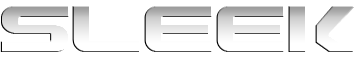
<style>
.page{position:relative;width:358px;height:60px;background:#ffffff}
.page>*{position:absolute;margin:0}
.t1{font:72px "Gunship";letter-spacing:-0.05em}
</style>
<div class="page">
<p class="t1" style="left:0px;top:6px;width:356px;height:46px">Sleek</p>
</div>
